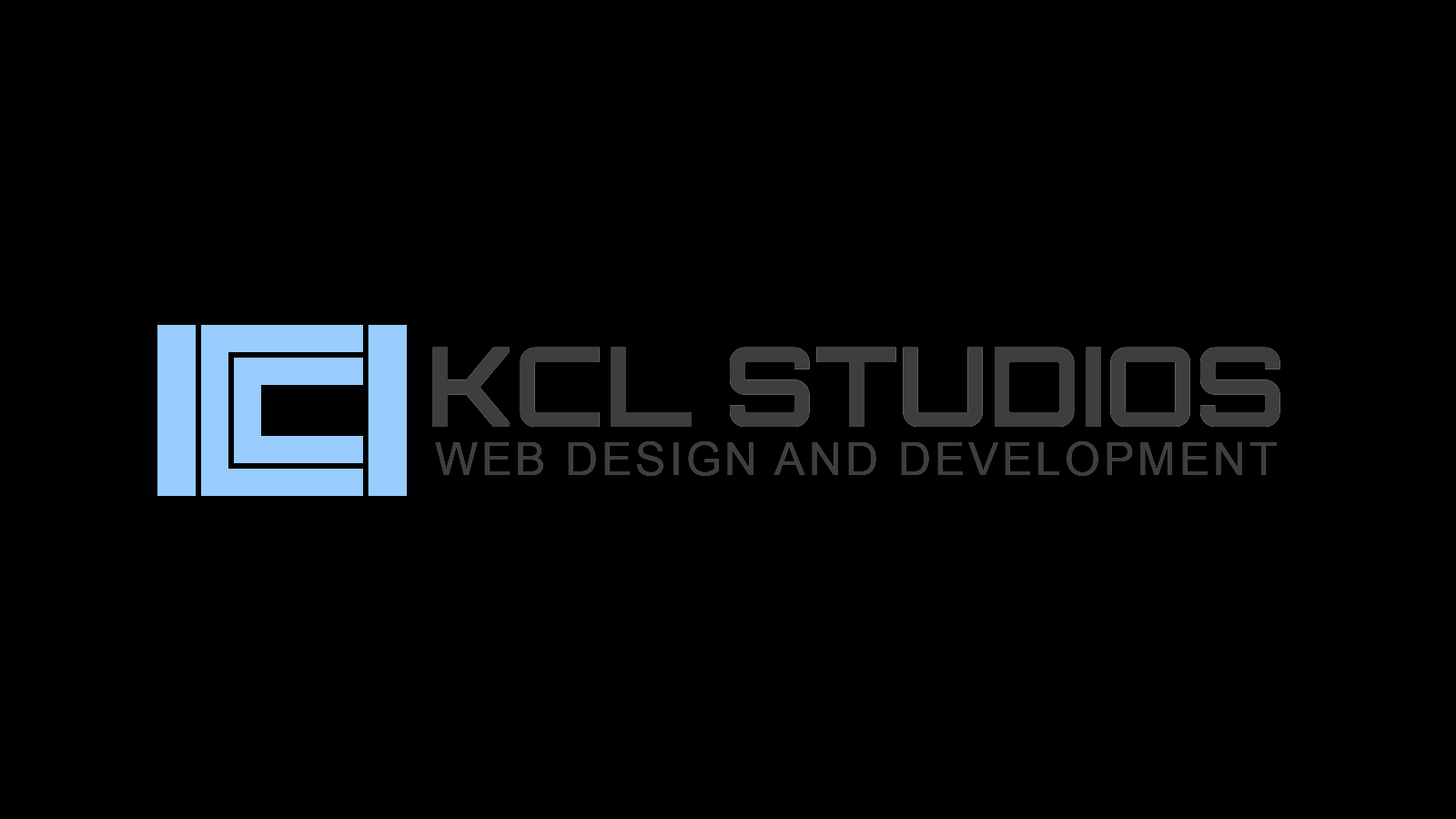
<style>
.page{position:relative;width:1456px;height:819px;background:#000000}
.page>*{position:absolute;margin:0}
.t1{font:109.8px "Orbitron-Bold";color:#3e3e3e}
.t2{font:45.7px "ArialMT";letter-spacing:0.075em;color:#3e3e3e}
</style>
<div class="page">
<p class="t1" style="left:432px;top:347px;width:848px;height:80px">KCL STUDIOS</p>
<p class="t1" style="left:432px;top:347px;width:848px;height:80px">KCL STUDIOS</p>
<p class="t2" style="left:435px;top:441px;width:842px;height:35px">WEB DESIGN AND DEVELOPMENT</p>
<p class="t2" style="left:435px;top:441px;width:842px;height:35px">WEB DESIGN AND DEVELOPMENT</p>
</div>
